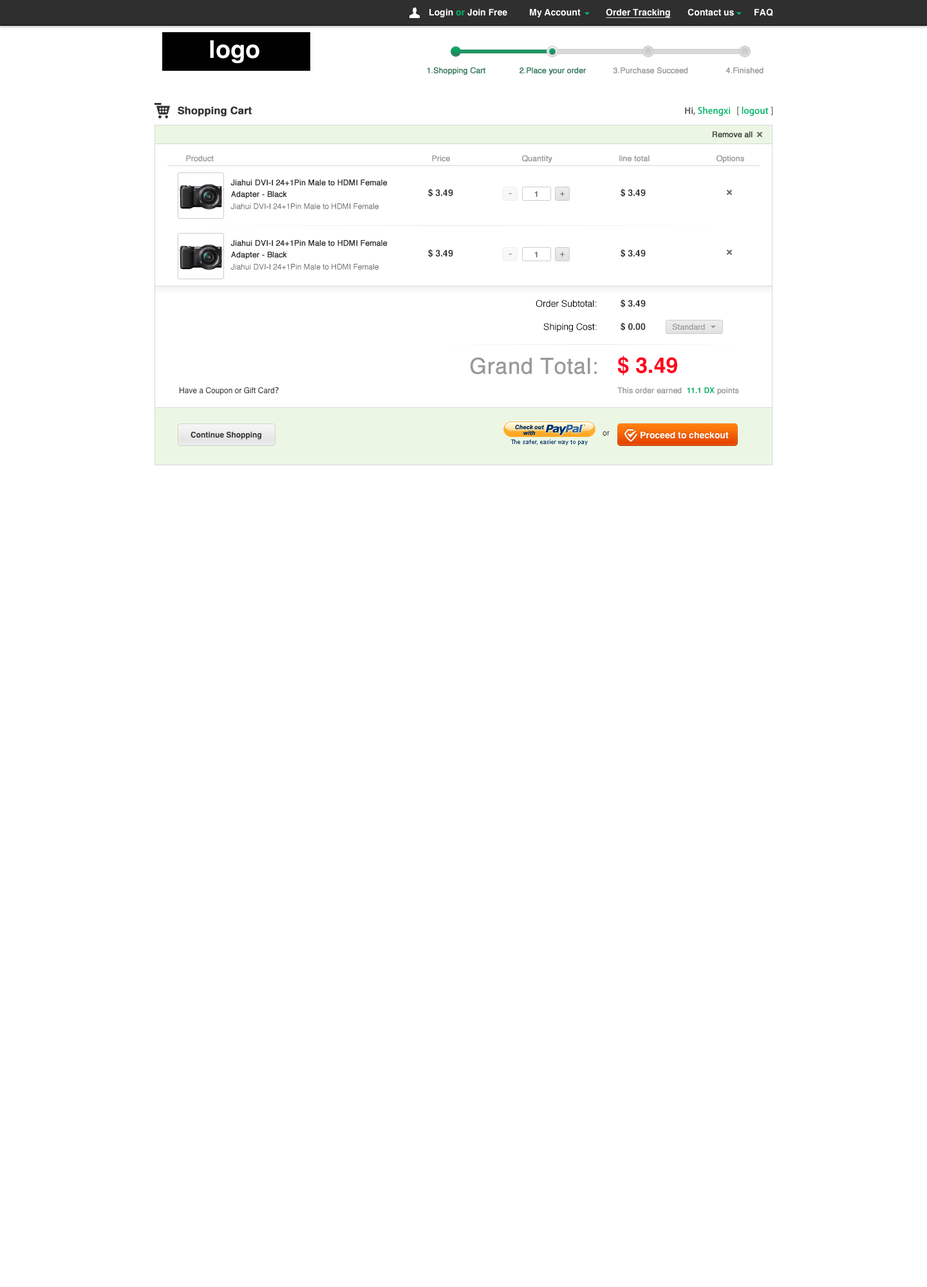
<style>
.page{position:relative;width:927px;height:1287px;background:#ffffff}
.page>*{position:absolute;margin:0}
.t1{font:9px "Helvetica-Bold";color:#ffffff}
.t2{font:9px "Helvetica-Bold";color:#00b266}
.t3{font:9px "Helvetica-Bold";color:#ffffff;text-decoration:underline}
.t4{font:24.5px "Helvetica-Bold";color:#ffffff}
.t5{font:7.7px "Helvetica";color:#287755;font-weight:bold}
.t6{font:7.7px "Helvetica";color:#999999;font-weight:bold}
.t7{font:10.3px "Helvetica-Bold";color:#333333;font-weight:bold}
.t8{font:9px "AdobeHeitiStd-Regular";color:#00b266}
.t9{font:9px "Helvetica-Bold";color:#666666}
.t10{font:9px "AdobeHeitiStd-Regular";color:#666666}
.t11{font:7.7px "Helvetica";color:#333333;font-weight:bold}
.t12{font:7.7px/11.6px "Helvetica";color:#333333;font-weight:bold}
.t13{font:9px "Helvetica-Bold";color:#333333}
.t14{font:9px "Helvetica"}
.t15{font:7.7px "Helvetica-Bold";color:#666666}
.t16{font:9px "Helvetica";color:#666666}
.t17{font:7.7px "Helvetica";color:#666666}
.t18{font:9px "Helvetica";color:#010000}
.t19{font:21.9px "Helvetica";color:#999999;font-weight:bold}
.t20{font:21.9px "Helvetica-Bold";color:#ff001e}
.t21{font:7.7px "Helvetica";color:#333333}
.t22{font:7.7px "AdobeHeitiStd-Regular";color:#333333}
.t23{font:7.7px "Helvetica-Bold";color:#00b266}
.t24{font:7.7px "Helvetica-Bold";color:#333333}
.t25{font:7.7px "Helvetica";color:#010000}
</style>
<div class="page">
<p class="t1" style="left:429px;top:8px;width:78px;height:9px">Login <span class="t2">or </span>Join Free</p>
<p class="t1" style="left:530px;top:8px;width:50px;height:9px">My Account</p>
<p class="t3" style="left:605px;top:8px;width:65px;height:10px">Order Tracking</p>
<p class="t1" style="left:687px;top:8px;width:47px;height:8px">Contact us</p>
<p class="t1" style="left:754px;top:8px;width:19px;height:8px">FAQ</p>
<p class="t4" style="left:210px;top:40px;width:49px;height:24px">logo</p>
<p class="t5" style="left:427px;top:67px;width:58px;height:8px">1.Shopping Cart</p>
<p class="t5" style="left:519px;top:67px;width:67px;height:8px">2.Place your order</p>
<p class="t6" style="left:613px;top:67px;width:75px;height:6px">3.Purchase Succeed</p>
<p class="t6" style="left:725px;top:67px;width:38px;height:6px">4.Finished</p>
<p class="t7" style="left:178px;top:106px;width:74px;height:10px">Shopping Cart</p>
<p class="t8" style="left:685px;top:106px;width:45px;height:10px"><span class="t9">Hi</span><span class="t10">, </span>Shengxi</p>
<p class="t8" style="left:737px;top:106px;width:36px;height:10px"><span class="t10">[ </span>logout<span class="t10"> ]</span></p>
<p class="t11" style="left:712px;top:131px;width:40px;height:7px">Remove all</p>
<p class="t6" style="left:186px;top:155px;width:28px;height:7px">Product</p>
<p class="t6" style="left:432px;top:155px;width:18px;height:7px">Price</p>
<p class="t6" style="left:522px;top:155px;width:30px;height:8px">Quantity</p>
<p class="t6" style="left:619px;top:155px;width:30px;height:7px">line total</p>
<p class="t6" style="left:716px;top:155px;width:28px;height:8px">Options</p>
<p class="t12" style="left:230px;top:180px;width:157px;height:19px">Jiahui DVI-I 24+1Pin Male to HDMI Female Adapter - Black</p>
<p class="t13" style="left:428px;top:189px;width:25px;height:8px">$ 3.49</p>
<p class="t14" style="left:509px;top:193px;width:3px;height:1px">-</p>
<p class="t15" style="left:534px;top:191px;width:3px;height:6px">1</p>
<p class="t16" style="left:560px;top:191px;width:4px;height:5px">+</p>
<p class="t13" style="left:620px;top:189px;width:25px;height:8px">$ 3.49</p>
<p class="t17" style="left:230px;top:203px;width:148px;height:6px">Jiahui DVI-I 24+1Pin Male to HDMI Female</p>
<p class="t12" style="left:230px;top:240px;width:157px;height:19px">Jiahui DVI-I 24+1Pin Male to HDMI Female Adapter - Black</p>
<p class="t13" style="left:428px;top:249px;width:25px;height:8px">$ 3.49</p>
<p class="t14" style="left:509px;top:254px;width:3px;height:1px">-</p>
<p class="t15" style="left:534px;top:252px;width:3px;height:5px">1</p>
<p class="t16" style="left:560px;top:252px;width:4px;height:5px">+</p>
<p class="t13" style="left:620px;top:249px;width:25px;height:8px">$ 3.49</p>
<p class="t17" style="left:230px;top:264px;width:148px;height:6px">Jiahui DVI-I 24+1Pin Male to HDMI Female</p>
<p class="t18" style="left:535px;top:300px;width:61px;height:7px">Order Subtotal:</p>
<p class="t13" style="left:620px;top:299px;width:25px;height:9px">$ 3.49</p>
<p class="t18" style="left:543px;top:323px;width:53px;height:9px">Shiping Cost:</p>
<p class="t13" style="left:620px;top:322px;width:25px;height:9px">$ 0.00</p>
<p class="t6" style="left:672px;top:324px;width:33px;height:6px">Standard</p>
<p class="t19" style="left:470px;top:357px;width:126px;height:17px">Grand Total:</p>
<p class="t20" style="left:617px;top:356px;width:60px;height:20px">$ 3.49</p>
<p class="t21" style="left:179px;top:387px;width:100px;height:8px">Have a Coupon or Gift Card<span class="t22">？</span></p>
<p class="t6" style="left:617px;top:387px;width:122px;height:8px">This order earned  <span class="t23">11.1 DX</span> points</p>
<p class="t24" style="left:190px;top:431px;width:71px;height:8px">Continue Shopping</p>
<p class="t25" style="left:602px;top:431px;width:7px;height:5px">or</p>
<p class="t1" style="left:640px;top:431px;width:88px;height:8px">Proceed to checkout</p>
</div>
